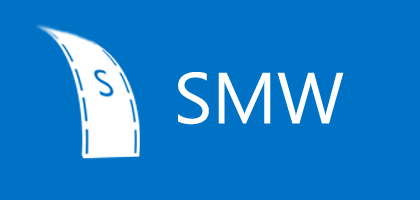
<style>
.page{position:relative;width:420px;height:200px;background:#0072c6}
.page>*{position:absolute;margin:0}
.t1{font:72px "SegoeUI";color:#ffffff}
</style>
<div class="page">
<p class="t1" style="left:178px;top:72px;width:166px;height:53px">SMW</p>
</div>
